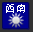
<style>
.page{position:relative;width:33px;height:32px;background:#000090}
.page>*{position:absolute;margin:0}
.t1{font:10.4px "SimSun";color:#ffffff}
</style>
<div class="page">
<p class="t1" style="left:6px;top:4px;width:19px;height:9px">西南</p>
</div>
